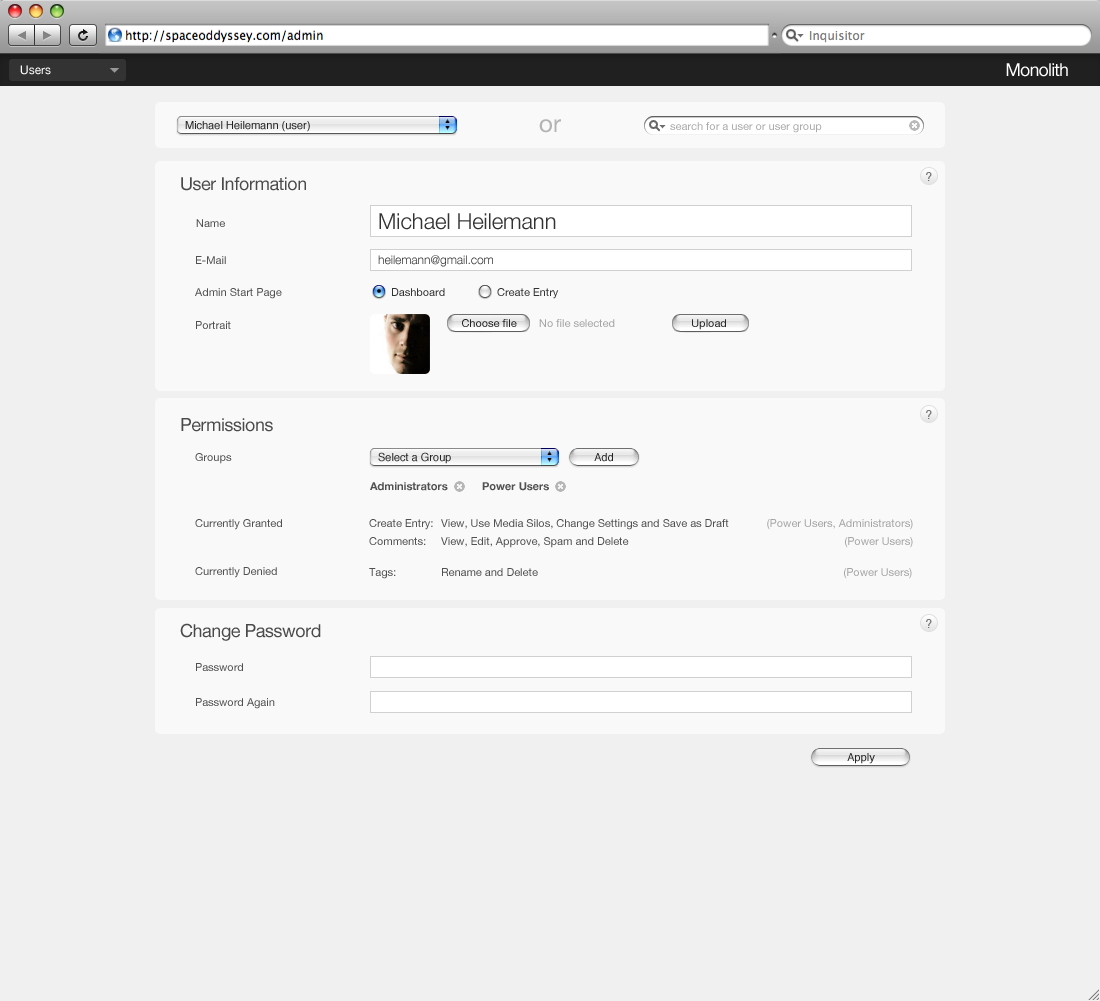
<style>
.page{position:relative;width:1100px;height:1001px;background:#f0f0f0}
.page>*{position:absolute;margin:0}
.t1{font:12px "HelveticaNeue";color:#ffffff}
.t2{font:18px "HelveticaNeue";letter-spacing:-0.05em;color:#ffffff}
.t3{font:11px "Helvetica";color:#242424}
.t4{font:24px "HelveticaNeue";color:#b4b4b4}
.t5{font:11px "HelveticaNeue";color:#ababab}
.t6{font:12px "Helvetica";color:#767676}
.t7{font:18px "HelveticaNeue";letter-spacing:-0.025em;color:#4a4a4a}
.t8{font:11px "HelveticaNeue";color:#525151}
.t9{font:22px "HelveticaNeue-Light";color:#333333}
.t10{font:12px "HelveticaNeue-Light";color:#333333}
.t11{font:11px "HelveticaNeue";color:#333333}
.t12{font:11px "HelveticaNeue";color:#242424}
.t13{font:11px "HelveticaNeue";color:#a4a4a4}
.t14{font:11px "HelveticaNeue-Bold";color:#525151}
.t15{font:11px/18px "HelveticaNeue";color:#525151}
.t16{font:11px/18px "HelveticaNeue";color:#a5a5a5}
.t17{font:11px "HelveticaNeue";color:#a5a5a5}
</style>
<div class="page">
<p class="t1" style="left:20px;top:65px;width:31px;height:10px">Users</p>
<p class="t2" style="left:1006px;top:63px;width:62px;height:14px">Monolith</p>
<p class="t3" style="left:185px;top:121px;width:125px;height:11px">Michael Heilemann (user)</p>
<p class="t4" style="left:539px;top:119px;width:22px;height:14px">or</p>
<p class="t5" style="left:670px;top:122px;width:152px;height:11px">search for a user or user group</p>
<p class="t6" style="left:926px;top:172px;width:6px;height:9px">?</p>
<p class="t7" style="left:181px;top:177px;width:125px;height:14px">User Information</p>
<p class="t8" style="left:196px;top:219px;width:29px;height:8px">Name</p>
<p class="t9" style="left:379px;top:213px;width:177px;height:17px">Michael Heilemann</p>
<p class="t8" style="left:196px;top:256px;width:30px;height:8px">E-Mail</p>
<p class="t10" style="left:378px;top:255px;width:115px;height:12px">heilemann@gmail.com</p>
<p class="t8" style="left:195px;top:288px;width:87px;height:11px">Admin Start Page</p>
<p class="t11" style="left:392px;top:288px;width:53px;height:8px">Dashboard</p>
<p class="t11" style="left:497px;top:288px;width:62px;height:11px">Create Entry</p>
<p class="t8" style="left:196px;top:321px;width:35px;height:8px">Portrait</p>
<p class="t12" style="left:462px;top:319px;width:55px;height:8px">Choose file</p>
<p class="t13" style="left:539px;top:319px;width:76px;height:8px">No file selected</p>
<p class="t12" style="left:692px;top:319px;width:34px;height:11px">Upload</p>
<p class="t6" style="left:926px;top:410px;width:6px;height:9px">?</p>
<p class="t7" style="left:181px;top:418px;width:92px;height:14px">Permissions</p>
<p class="t8" style="left:195px;top:453px;width:37px;height:11px">Groups</p>
<p class="t3" style="left:378px;top:452px;width:73px;height:12px">Select a Group</p>
<p class="t3" style="left:594px;top:453px;width:19px;height:9px">Add</p>
<p class="t14" style="left:370px;top:482px;width:78px;height:9px">Administrators</p>
<p class="t14" style="left:482px;top:482px;width:67px;height:9px">Power Users</p>
<p class="t8" style="left:195px;top:519px;width:87px;height:11px">Currently Granted</p>
<p class="t15" style="left:369px;top:519px;width:360px;height:29px">Create Entry: View, Use Media Silos, Change Settings and Save as Draft <br>Comments: View, Edit, Approve, Spam and Delete</p>
<p class="t16" style="left:767px;top:519px;width:146px;height:29px;text-align:right">(Power Users, Administrators)<br>(Power Users)</p>
<p class="t8" style="left:195px;top:567px;width:82px;height:11px">Currently Denied</p>
<p class="t8" style="left:369px;top:568px;width:169px;height:11px">Tags:  Rename and Delete</p>
<p class="t17" style="left:844px;top:568px;width:68px;height:11px">(Power Users)</p>
<p class="t7" style="left:180px;top:623px;width:141px;height:18px">Change Password</p>
<p class="t6" style="left:926px;top:619px;width:6px;height:9px">?</p>
<p class="t8" style="left:196px;top:663px;width:47px;height:8px">Password</p>
<p class="t8" style="left:196px;top:698px;width:79px;height:11px">Password Again</p>
<p class="t3" style="left:847px;top:753px;width:28px;height:11px">Apply</p>
</div>
